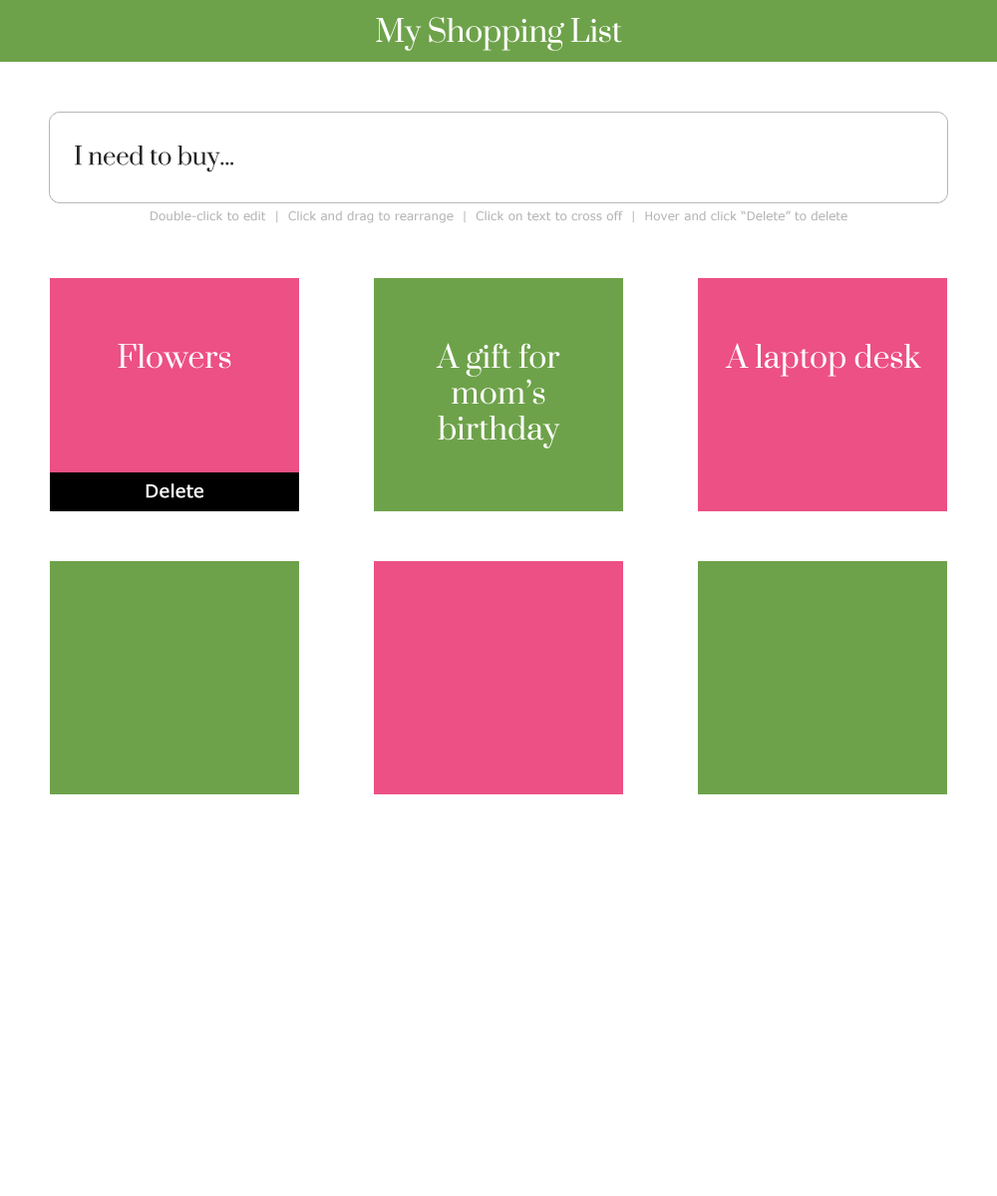
<style>
.page{position:relative;width:997px;height:1196px;background:#ffffff}
.page>*{position:absolute;margin:0}
.t1{font:29.9px "Prata-Regular";letter-spacing:-0.01em;color:#ffffff}
.t2{font:23.9px "Prata-Regular";letter-spacing:-0.01em;color:#252525}
.t3{font:12px "Verdana";color:#b7b7b7}
.t4{font:29.9px "Prata-Regular";color:#ffffff}
.t5{font:29.9px/35.9px "Prata-Regular";color:#ffffff}
.t6{font:17.9px "Verdana";letter-spacing:-0.01em;color:#ffffff;font-weight:bold}
</style>
<div class="page">
<p class="t1" style="left:376px;top:17px;width:246px;height:34px">My Shopping List</p>
<p class="t2" style="left:75px;top:146px;width:158px;height:26px">I need to buy...</p>
<p class="t3" style="left:151px;top:210px;width:696px;height:13px">Double-click to edit  |  Click and drag to rearrange  |  Click on text to cross off  |  Hover and click “Delete” to delete</p>
<p class="t4" style="left:118px;top:344px;width:113px;height:25px">Flowers</p>
<p class="t5" style="left:436px;top:343px;width:124px;height:106px;text-align:center">A gift for mom’s <br>birthday</p>
<p class="t4" style="left:725px;top:343px;width:196px;height:34px">A laptop desk</p>
<p class="t6" style="left:146px;top:483px;width:57px;height:15px">Delete</p>
</div>
